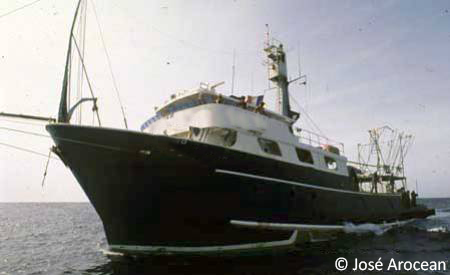
<style>
.page{position:relative;width:450px;height:275px}
.page>*{position:absolute;margin:0}
.t1{font:18px "Calibri";color:#ffffff}
</style>
<div class="page">
<p class="t1" style="left:335px;top:257px;width:111px;height:14px">© José Arocean</p>
</div>
